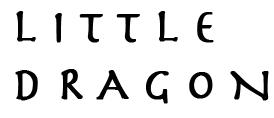
<style>
.page{position:relative;width:274px;height:118px;background:#ffffff}
.page>*{position:absolute;margin:0}
.t1{font:48px "Herculanum";letter-spacing:0.25em;color:#010101;text-transform:uppercase;font-weight:bold}
</style>
<div class="page">
<p class="t1" style="left:15px;top:11px;width:254px;height:93px">Little <br>Dragon</p>
</div>
